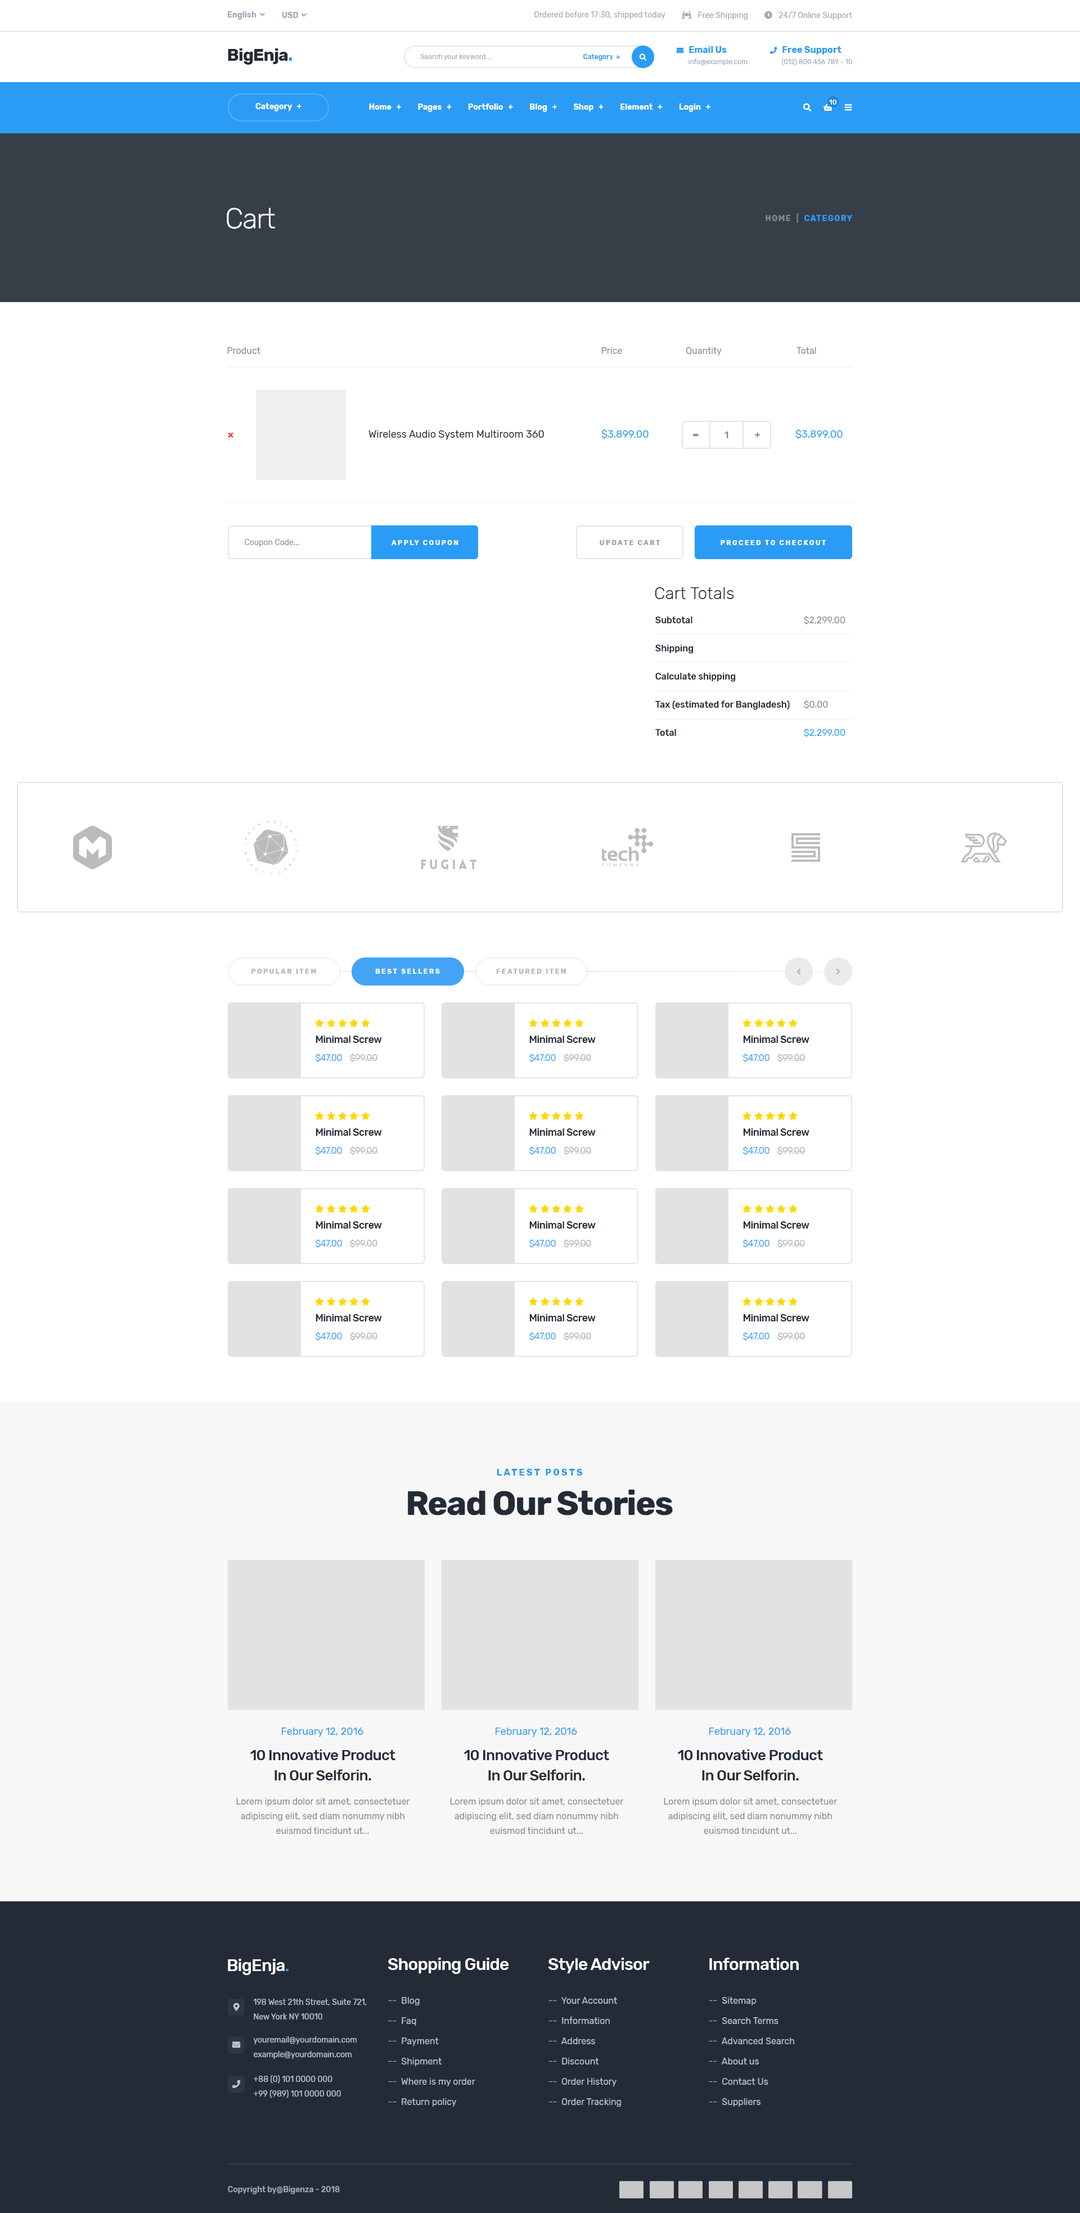
<style>
.page{position:relative;width:1080px;height:2213px;background:#ffffff}
.page>*{position:absolute;margin:0}
.t1{font:7.9px "Rubik-Regular";color:#a2aab6}
.t2{font:16.9px "Rubik-Bold";letter-spacing:-0.03em;color:#232b37}
.t3{font:16.9px "Rubik-Bold";letter-spacing:-0.03em;color:#2a9cf5}
.t4{font:6.8px "Rubik-Regular";color:#a2aab6}
.t5{font:6.8px "Rubik-Medium";color:#2a9cf5}
.t6{font:6.8px/11.2px "Rubik-Regular";color:#a2aab6}
.t7{font:6.8px/11.2px "FontAwesome5FreeSolid";color:#2a9cf5}
.t8{font:9px/11.2px "Rubik-Bold";color:#2a9cf5}
.t9{font:6.8px "Rubik-Medium";color:#ffffff}
.t10{font:7.9px "Rubik-Bold";color:#ffffff}
.t11{font:28.1px "Rubik-Light";letter-spacing:-0.03em;color:#ffffff}
.t12{font:7.9px "Rubik-Bold";letter-spacing:0.1em;color:#2a9cf5;text-transform:uppercase}
.t13{font:7.9px "Rubik-Bold";letter-spacing:0.1em;color:#848792;text-transform:uppercase}
.t14{font:9px "Rubik-Regular";color:#838b97}
.t15{font:10.1px "Rubik-Regular";color:#232b37}
.t16{font:10.1px "Rubik-Regular";color:#2a9cf5}
.t17{font:9px "Rubik-Medium";color:#838b97}
.t18{font:7.9px "Rubik-Regular";color:#8e96a1}
.t19{font:6.8px "Rubik-Bold";letter-spacing:0.2em;color:#ffffff;text-transform:uppercase}
.t20{font:6.8px "Rubik-Bold";letter-spacing:0.2em;color:#9a9da7;text-transform:uppercase}
.t21{font:16.9px "Rubik-Light";color:#232b37}
.t22{font:9px/28.1px "Rubik-Medium";color:#232b37}
.t23{font:9px/28.1px "Rubik-Regular";color:#838b97}
.t24{font:9px/28.1px "Rubik-Regular";color:#2a9cf5}
.t25{font:6.8px "Rubik-Bold";letter-spacing:0.2em;color:#b1b6bd;text-transform:uppercase}
.t26{font:10.1px "Rubik-Medium";letter-spacing:-0.03em;color:#232b37}
.t27{font:9px "Rubik-Regular";letter-spacing:-0.03em;color:#43a4f6}
.t28{font:9px "Rubik-Regular";letter-spacing:-0.03em;color:#b0b5bc}
.t29{font:33.8px/39.4px "Rubik-Bold";letter-spacing:-0.03em;color:#232b37}
.t30{font:9px/39.4px "Rubik-Bold";letter-spacing:0.2em;color:#2a9cf5;text-transform:uppercase}
.t31{font:14.6px/20.2px "Rubik-Medium";letter-spacing:-0.03em;color:#232b37}
.t32{font:9px/14.6px "Rubik-Regular";color:#838b97}
.t33{font:16.9px "Rubik-Medium";letter-spacing:-0.03em;color:#ffffff}
.t34{font:16.9px "Rubik-Medium";letter-spacing:-0.03em;color:#2a9cf5}
.t35{font:9px/20.2px "Rubik-Regular";color:#c1c6ce}
.t36{font:7.9px/14.6px "Rubik-Regular";color:#c1c6ce}
.t37{font:7.9px "Rubik-Medium";color:#a4abb6}
</style>
<div class="page">
<p class="t1" style="left:534px;top:11px;width:131px;height:8px">Ordered before 17:30, shipped today</p>
<p class="t2" style="left:228px;top:48px;width:64px;height:17px">BigEnja<span class="t3">.</span></p>
<p class="t4" style="left:420px;top:54px;width:72px;height:6px">Search your keyword....</p>
<p class="t5" style="left:583px;top:54px;width:37px;height:7px">Category  +</p>
<p class="t6" style="left:770px;top:46px;width:82px;height:19px"><span class="t7">phone  </span><span class="t8">Free Support<br>      </span> (012) 800 456 789 - 10</p>
<p class="t9" style="left:829px;top:100px;width:8px;height:5px">10</p>
<p class="t10" style="left:255px;top:103px;width:47px;height:8px">Category   +</p>
<p class="t10" style="left:369px;top:104px;width:341px;height:8px">Home   +          Pages   +          Portfolio   +          Blog   +          Shop   +          Element   +          Login   +</p>
<p class="t11" style="left:227px;top:208px;width:48px;height:21px">Cart</p>
<p class="t12" style="left:766px;top:213px;width:86px;height:10px"><span class="t13">home  |  </span>Category</p>
<p class="t14" style="left:227px;top:347px;width:33px;height:7px">Product</p>
<p class="t14" style="left:601px;top:347px;width:215px;height:9px">Price                     Quantity                                  Total</p>
<p class="t15" style="left:368px;top:430px;width:176px;height:10px">Wireless Audio System Multiroom 360</p>
<p class="t16" style="left:601px;top:429px;width:48px;height:10px">$3,899.00</p>
<p class="t17" style="left:724px;top:431px;width:4px;height:7px">1</p>
<p class="t16" style="left:795px;top:429px;width:48px;height:10px">$3,899.00</p>
<p class="t18" style="left:245px;top:539px;width:54px;height:8px">Coupon Code...</p>
<p class="t19" style="left:392px;top:540px;width:66px;height:5px">apply coupon</p>
<p class="t20" style="left:600px;top:540px;width:60px;height:5px">update cart</p>
<p class="t19" style="left:721px;top:540px;width:105px;height:5px">proceed to checkout</p>
<p class="t21" style="left:655px;top:587px;width:79px;height:12px">Cart Totals</p>
<p class="t22" style="left:655px;top:616px;width:190px;height:121px">Subtotal         <span class="t23">$2,299.00<br></span>Shipping<br>Calculate shipping<br>Tax (estimated for Bangladesh)    <span class="t23">$0.00<br></span>Total         <span class="t24">$2,299.00</span></p>
<p class="t25" style="left:251px;top:969px;width:65px;height:5px">popular item</p>
<p class="t19" style="left:375px;top:969px;width:65px;height:5px">best sellers</p>
<p class="t25" style="left:496px;top:969px;width:70px;height:5px">featured item</p>
<p class="t26" style="left:316px;top:1036px;width:66px;height:7px">Minimal Screw</p>
<p class="t26" style="left:529px;top:1036px;width:67px;height:7px">Minimal Screw</p>
<p class="t26" style="left:743px;top:1036px;width:66px;height:7px">Minimal Screw</p>
<p class="t27" style="left:316px;top:1054px;width:61px;height:8px">$47.00    <span class="t28">$99.00</span></p>
<p class="t27" style="left:529px;top:1054px;width:62px;height:8px">$47.00    <span class="t28">$99.00</span></p>
<p class="t27" style="left:743px;top:1054px;width:62px;height:8px">$47.00    <span class="t28">$99.00</span></p>
<p class="t26" style="left:316px;top:1128px;width:66px;height:8px">Minimal Screw</p>
<p class="t26" style="left:529px;top:1128px;width:67px;height:8px">Minimal Screw</p>
<p class="t26" style="left:743px;top:1128px;width:66px;height:8px">Minimal Screw</p>
<p class="t27" style="left:316px;top:1146px;width:61px;height:9px">$47.00    <span class="t28">$99.00</span></p>
<p class="t27" style="left:529px;top:1146px;width:62px;height:9px">$47.00    <span class="t28">$99.00</span></p>
<p class="t27" style="left:743px;top:1146px;width:62px;height:9px">$47.00    <span class="t28">$99.00</span></p>
<p class="t26" style="left:316px;top:1221px;width:66px;height:7px">Minimal Screw</p>
<p class="t26" style="left:529px;top:1221px;width:67px;height:7px">Minimal Screw</p>
<p class="t26" style="left:743px;top:1221px;width:66px;height:7px">Minimal Screw</p>
<p class="t27" style="left:316px;top:1239px;width:61px;height:9px">$47.00    <span class="t28">$99.00</span></p>
<p class="t27" style="left:529px;top:1239px;width:62px;height:9px">$47.00    <span class="t28">$99.00</span></p>
<p class="t27" style="left:743px;top:1239px;width:62px;height:9px">$47.00    <span class="t28">$99.00</span></p>
<p class="t26" style="left:316px;top:1314px;width:66px;height:7px">Minimal Screw</p>
<p class="t26" style="left:529px;top:1314px;width:67px;height:7px">Minimal Screw</p>
<p class="t26" style="left:743px;top:1314px;width:66px;height:7px">Minimal Screw</p>
<p class="t27" style="left:316px;top:1332px;width:61px;height:8px">$47.00    <span class="t28">$99.00</span></p>
<p class="t27" style="left:529px;top:1332px;width:62px;height:8px">$47.00    <span class="t28">$99.00</span></p>
<p class="t27" style="left:743px;top:1332px;width:62px;height:8px">$47.00    <span class="t28">$99.00</span></p>
<p class="t29" style="left:408px;top:1469px;width:265px;height:46px;text-align:center"><span class="t30">Latest Posts<br></span>Read Our Stories</p>
<p class="t16" style="left:282px;top:1727px;width:81px;height:10px">February 12, 2016</p>
<p class="t16" style="left:496px;top:1727px;width:81px;height:10px">February 12, 2016</p>
<p class="t16" style="left:709px;top:1727px;width:82px;height:10px">February 12, 2016</p>
<p class="t31" style="left:250px;top:1749px;width:145px;height:31px;text-align:center">10 Innovative Product<br>In Our Selforin.</p>
<p class="t31" style="left:464px;top:1749px;width:145px;height:31px;text-align:center">10 Innovative Product<br>In Our Selforin.</p>
<p class="t31" style="left:678px;top:1749px;width:145px;height:31px;text-align:center">10 Innovative Product<br>In Our Selforin.</p>
<p class="t32" style="left:236px;top:1798px;width:174px;height:36px;text-align:center">Lorem ipsum dolor sit amet, consectetuer<br>adipiscing elit, sed diam nonummy nibh<br>euismod tincidunt ut...</p>
<p class="t32" style="left:450px;top:1798px;width:174px;height:36px;text-align:center">Lorem ipsum dolor sit amet, consectetuer<br>adipiscing elit, sed diam nonummy nibh<br>euismod tincidunt ut...</p>
<p class="t32" style="left:664px;top:1798px;width:174px;height:36px;text-align:center">Lorem ipsum dolor sit amet, consectetuer<br>adipiscing elit, sed diam nonummy nibh<br>euismod tincidunt ut...</p>
<p class="t33" style="left:228px;top:1959px;width:61px;height:16px">BigEnja<span class="t34">.</span></p>
<p class="t33" style="left:388px;top:1958px;width:121px;height:16px">Shopping Guide</p>
<p class="t33" style="left:548px;top:1958px;width:102px;height:15px">Style Advisor</p>
<p class="t33" style="left:709px;top:1958px;width:90px;height:12px">Information</p>
<p class="t35" style="left:388px;top:1997px;width:87px;height:110px">--  Blog<br>--  Faq<br>--  Payment<br>--  Shipment<br>--  Where is my order<br>--  Return policy</p>
<p class="t35" style="left:548px;top:1997px;width:73px;height:110px">--  Your Account<br>--  Information<br>--  Address<br>--  Discount<br>--  Order History<br>--  Order Tracking</p>
<p class="t35" style="left:709px;top:1997px;width:85px;height:110px">--  Sitemap<br>--  Search Terms<br>--  Advanced Search<br>--  About us<br>--  Contact Us<br>--  Suppliers</p>
<p class="t36" style="left:253px;top:1999px;width:114px;height:20px">198 West 21th Street, Suite 721,<br>New York NY 10010</p>
<p class="t36" style="left:253px;top:2036px;width:104px;height:23px">youremail@yourdomain.com<br>example@yourdomain.com</p>
<p class="t36" style="left:254px;top:2075px;width:87px;height:23px">+88 (0) 101 0000 000<br>+99 (989) 101 0000 000</p>
<p class="t37" style="left:228px;top:2186px;width:112px;height:8px">Copyright by@Bigenza - 2018</p>
</div>
